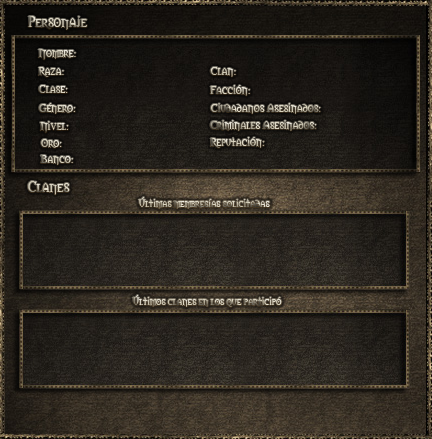
<style>
.page{position:relative;width:432px;height:439px}
.page>*{position:absolute;margin:0}
.t1{font:14px "Morpheus"}
.t2{font:11px "Morpheus"}
.t3{font:11px "Morpheus";color:#ddd8c5}
.t4{font:11px "Morpheus";color:#dad5c1}
.t5{font:10px "Morpheus"}
</style>
<div class="page">
<p class="t1" style="left:28px;top:16px;width:59px;height:14px">Personaje</p>
<p class="t2" style="left:38px;top:49px;width:38px;height:11px">Nombre:</p>
<p class="t3" style="left:38px;top:67px;width:26px;height:10px">Raza:</p>
<p class="t4" style="left:210px;top:67px;width:26px;height:10px">Clan:</p>
<p class="t2" style="left:38px;top:85px;width:30px;height:8px">Clase:</p>
<p class="t2" style="left:210px;top:85px;width:40px;height:11px">Facción:</p>
<p class="t2" style="left:39px;top:103px;width:37px;height:11px">Género:</p>
<p class="t2" style="left:210px;top:103px;width:111px;height:11px">Ciudadanos Asesinados:</p>
<p class="t2" style="left:40px;top:121px;width:29px;height:12px">Nivel:</p>
<p class="t2" style="left:210px;top:120px;width:107px;height:11px">Criminales Asesinados:</p>
<p class="t2" style="left:210px;top:137px;width:55px;height:11px">Reputación:</p>
<p class="t2" style="left:41px;top:139px;width:21px;height:9px">Oro:</p>
<p class="t2" style="left:40px;top:155px;width:33px;height:10px">Banco:</p>
<p class="t1" style="left:28px;top:181px;width:42px;height:14px">Clanes</p>
<p class="t5" style="left:138px;top:197px;width:132px;height:12px">Últimas membresías solicitadas</p>
<p class="t5" style="left:132px;top:295px;width:150px;height:12px">Últimos clanes en los que participó</p>
</div>
